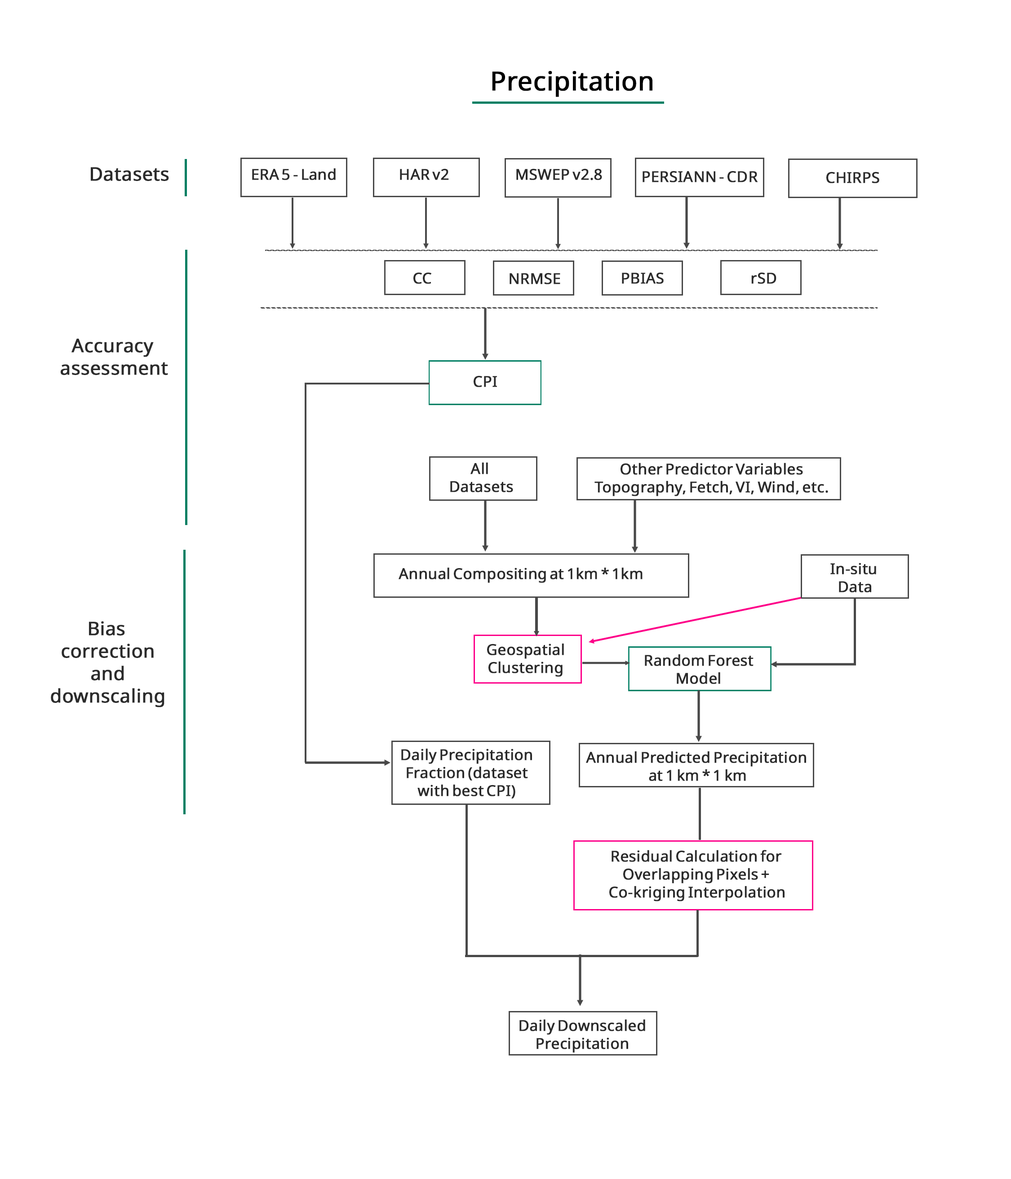
<style>
.page{position:relative;width:1011px;height:1179px;background:#ffffff}
.page>*{position:absolute;margin:0}
.t1{font:26.2px "SansSerifCollection";color:#000000;font-weight:bold}
.t2{font:18.7px "SansSerifCollection";color:#2b2b2b;font-weight:bold}
.t3{font:15px "SansSerifCollection";color:#2b2b2b;font-weight:bold}
</style>
<div class="page">
<p class="t1" style="left:492px;top:71px;width:160px;height:26px">Precipitation</p>
<p class="t2" style="left:91px;top:167px;width:78px;height:14px">Datasets</p>
<p class="t3" style="left:252px;top:168px;width:84px;height:12px">ERA 5 - Land</p>
<p class="t3" style="left:400px;top:168px;width:49px;height:12px">HAR v2</p>
<p class="t3" style="left:516px;top:168px;width:86px;height:12px">MSWEP v2.8</p>
<p class="t3" style="left:643px;top:171px;width:115px;height:11px">PERSIANN - CDR</p>
<p class="t3" style="left:826px;top:172px;width:53px;height:11px">CHIRPS</p>
<p class="t3" style="left:413px;top:272px;width:18px;height:12px">CC</p>
<p class="t3" style="left:510px;top:273px;width:50px;height:11px">NRMSE</p>
<p class="t3" style="left:622px;top:272px;width:42px;height:12px">PBIAS</p>
<p class="t3" style="left:751px;top:272px;width:25px;height:12px">rSD</p>
<p class="t2" style="left:61px;top:339px;width:107px;height:36px;text-align:center">Accuracy <br>assessment</p>
<p class="t3" style="left:474px;top:376px;width:23px;height:11px">CPI</p>
<p class="t3" style="left:450px;top:462px;width:63px;height:30px;text-align:center">All <br>Datasets</p>
<p class="t3" style="left:594px;top:463px;width:234px;height:34px;text-align:center">Other Predictor Variables<br>Topography, Fetch, VI, Wind, etc.</p>
<p class="t3" style="left:399px;top:567px;width:244px;height:16px">Annual Compositing at 1km * 1km</p>
<p class="t3" style="left:830px;top:563px;width:46px;height:30px;text-align:center">In-situ <br>Data</p>
<p class="t2" style="left:51px;top:621px;width:113px;height:87px;text-align:center">Bias <br>correction<br>and<br>downscaling</p>
<p class="t3" style="left:487px;top:643px;width:77px;height:34px;text-align:center">Geospatial<br>Clustering</p>
<p class="t3" style="left:645px;top:654px;width:109px;height:30px;text-align:center">Random Forest<br>Model</p>
<p class="t3" style="left:401px;top:749px;width:131px;height:50px;text-align:center">Daily Precipitation<br>Fraction (dataset<br>with best CPI)</p>
<p class="t3" style="left:586px;top:751px;width:220px;height:30px;text-align:center">Annual Predicted Precipitation <br>at 1 km * 1 km</p>
<p class="t3" style="left:609px;top:850px;width:176px;height:52px;text-align:center">Residual Calculation for <br>Overlapping Pixels + <br>Co-kriging Interpolation</p>
<p class="t3" style="left:519px;top:1020px;width:126px;height:33px;text-align:center">Daily Downscaled<br>Precipitation</p>
</div>
